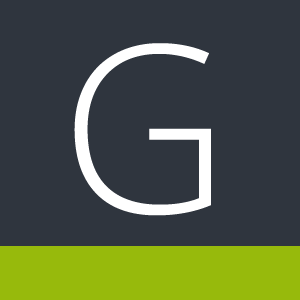
<style>
.page{position:relative;width:300px;height:300px;background:#2f353e}
.page>*{position:absolute;margin:0}
.t1{font:234px "OpenSans-Light";letter-spacing:0.005em;color:#ffffff}
</style>
<div class="page">
<p class="t1" style="left:74px;top:43px;width:137px;height:173px">G</p>
</div>
